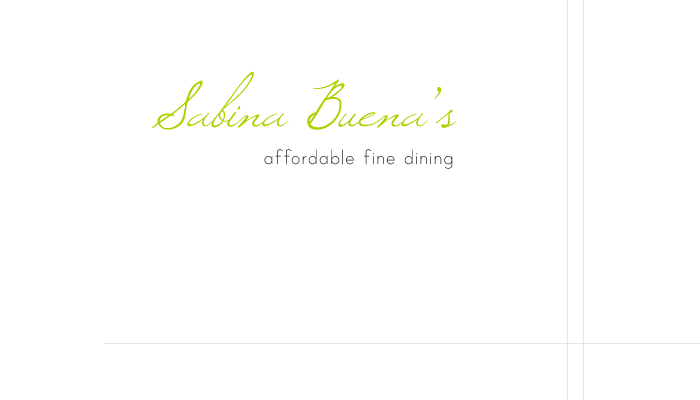
<style>
.page{position:relative;width:700px;height:400px;background:#ffffff}
.page>*{position:absolute;margin:0}
.t1{font:72px "Windsong";color:#aed200}
.t2{font:81px "Windsong";color:#aed200}
</style>
<div class="page">
<p class="t1" style="left:152px;top:71px;width:305px;height:59px"><span class="t2">S</span>abina <span class="t2">B</span>uena’s</p>
</div>
